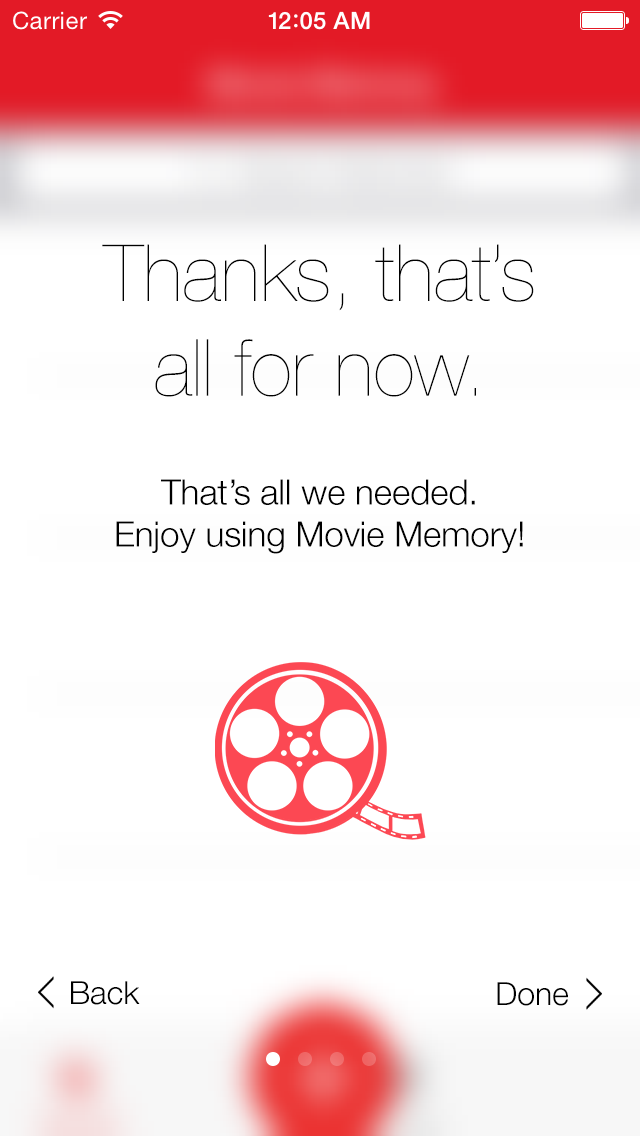
<style>
.page{position:relative;width:640px;height:1136px;background:#ffffff}
.page>*{position:absolute;margin:0}
.t1{font:79px "HelveticaNeue-UltraLight";color:#000000}
.t2{font:35px "HelveticaNeue-Light";color:#000000}
.t3{font:32px "HelveticaNeue-Light";color:#000000}
</style>
<div class="page">
<p class="t1" style="left:102px;top:244px;width:432px;height:153px;text-align:center">Thanks, that’s<br>all for now.</p>
<p class="t2" style="left:116px;top:479px;width:407px;height:75px;text-align:center">That’s all we needed.<br>Enjoy using Movie Memory!</p>
<p class="t3" style="left:71px;top:981px;width:69px;height:24px">Back</p>
<p class="t3" style="left:497px;top:982px;width:71px;height:24px">Done</p>
</div>
